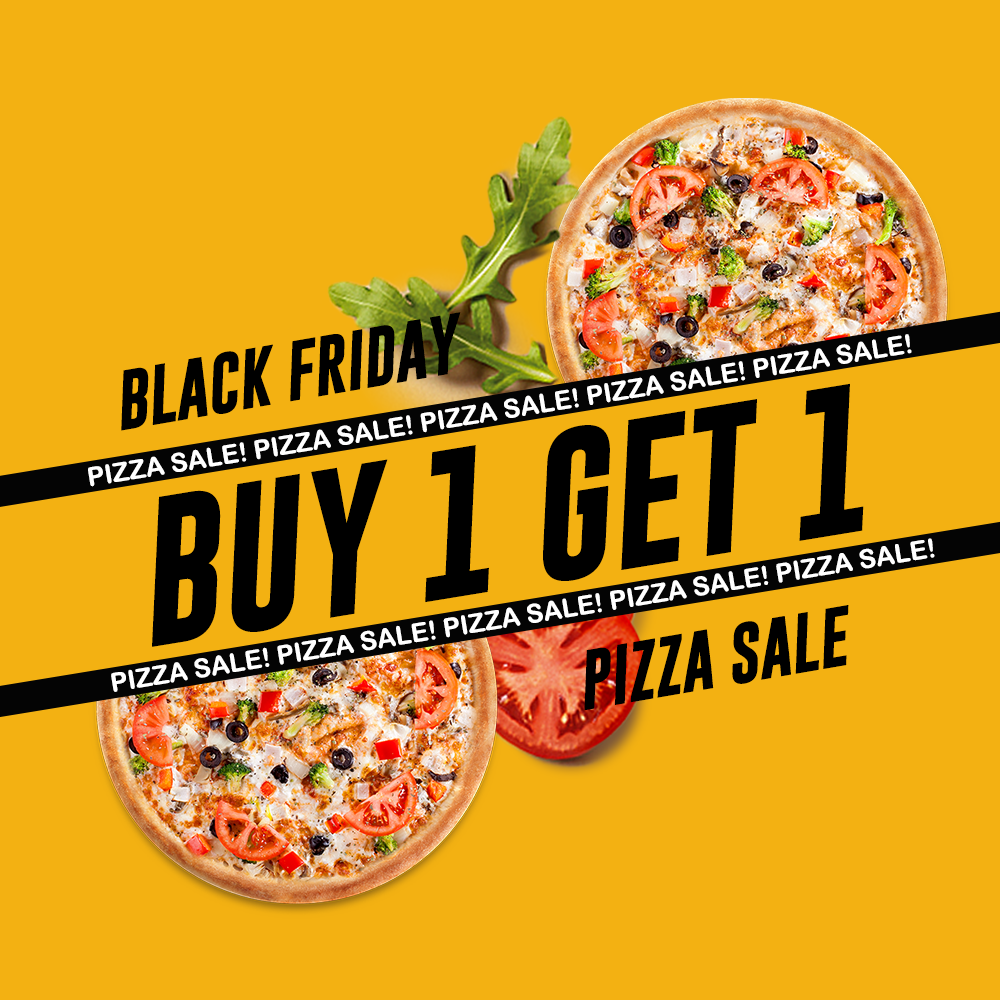
<style>
.page{position:relative;width:1000px;height:1000px;background:#f3b112}
.page>*{position:absolute;margin:0}
.t1{font:60px "GoboldBold-Italic";color:#000000}
.t2{font:26px "ArialRoundedMTBold";color:#ffffff}
.t3{font:150px "GoboldBold-Italic";color:#000000}
</style>
<div class="page">
<p class="t1" style="left:121px;top:312px;width:340px;height:119px;rotate:-10deg">BLACK FRIDAY</p>
<p class="t2" style="left:88px;top:334px;width:824px;height:153px;rotate:-9deg">PIZZA SALE! PIZZA SALE! PIZZA SALE! PIZZA SALE! PIZZA SALE!</p>
<p class="t3" style="left:152px;top:383px;width:712px;height:264px;rotate:-9deg">BUY 1 GET 1</p>
<p class="t2" style="left:111px;top:538px;width:824px;height:154px;rotate:-9deg">PIZZA SALE! PIZZA SALE! PIZZA SALE! PIZZA SALE! PIZZA SALE!</p>
<p class="t1" style="left:584px;top:605px;width:265px;height:106px;rotate:-10deg">PIZZA SALE</p>
</div>
